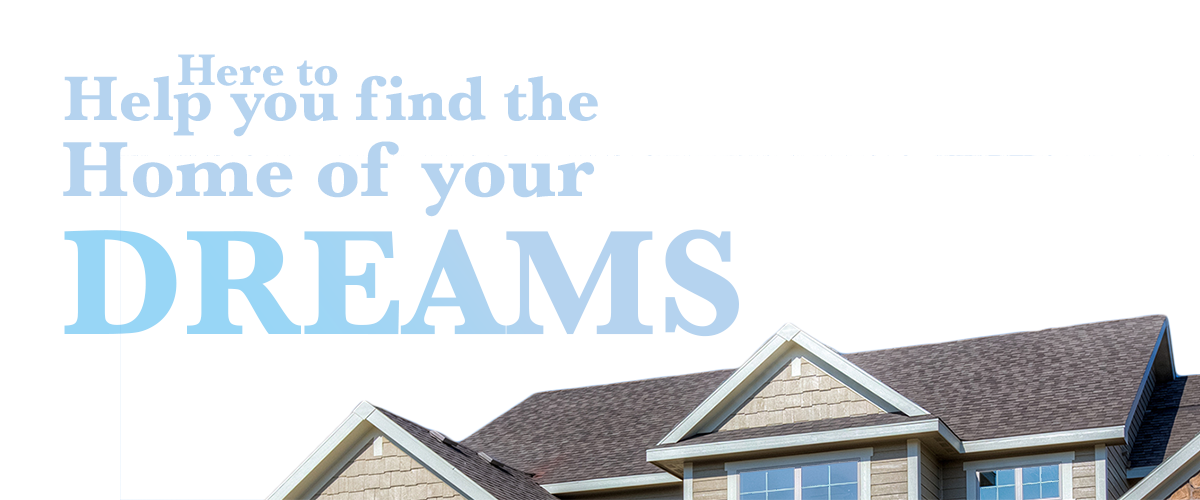
<style>
.page{position:relative;width:1200px;height:500px;background:#ffffff}
.page>*{position:absolute;margin:0}
.t1{font:46px "Baskerville-Bold";color:#b5d3ef}
.t2{font:65.4px "Baskerville-Bold";color:#b5d3ef}
.t3{font:80.9px "Baskerville-Bold";color:#b5d3ef}
.t4{font:155.2px "Baskerville-Bold";color:#a4d5f3}
</style>
<div class="page">
<p class="t1" style="left:178px;top:54px;width:160px;height:32px">Here to</p>
<p class="t2" style="left:64px;top:75px;width:534px;height:62px">Help you find the</p>
<p class="t3" style="left:63px;top:141px;width:532px;height:76px">Home of your</p>
<p class="t4" style="left:64px;top:229px;width:675px;height:108px">DREAMS</p>
</div>
